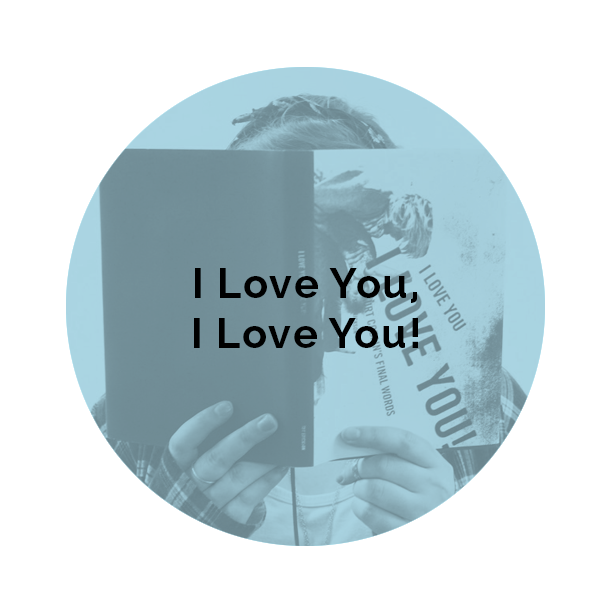
<style>
.page{position:relative;width:600px;height:600px;background:#ffffff}
.page>*{position:absolute;margin:0}
.t1{font:41.7px "Raleway-Bold";letter-spacing:0.04em;color:#000000}
</style>
<div class="page">
<p class="t1" style="left:194px;top:268px;width:224px;height:80px;text-align:center">I Love You, <br>I Love You!</p>
</div>
